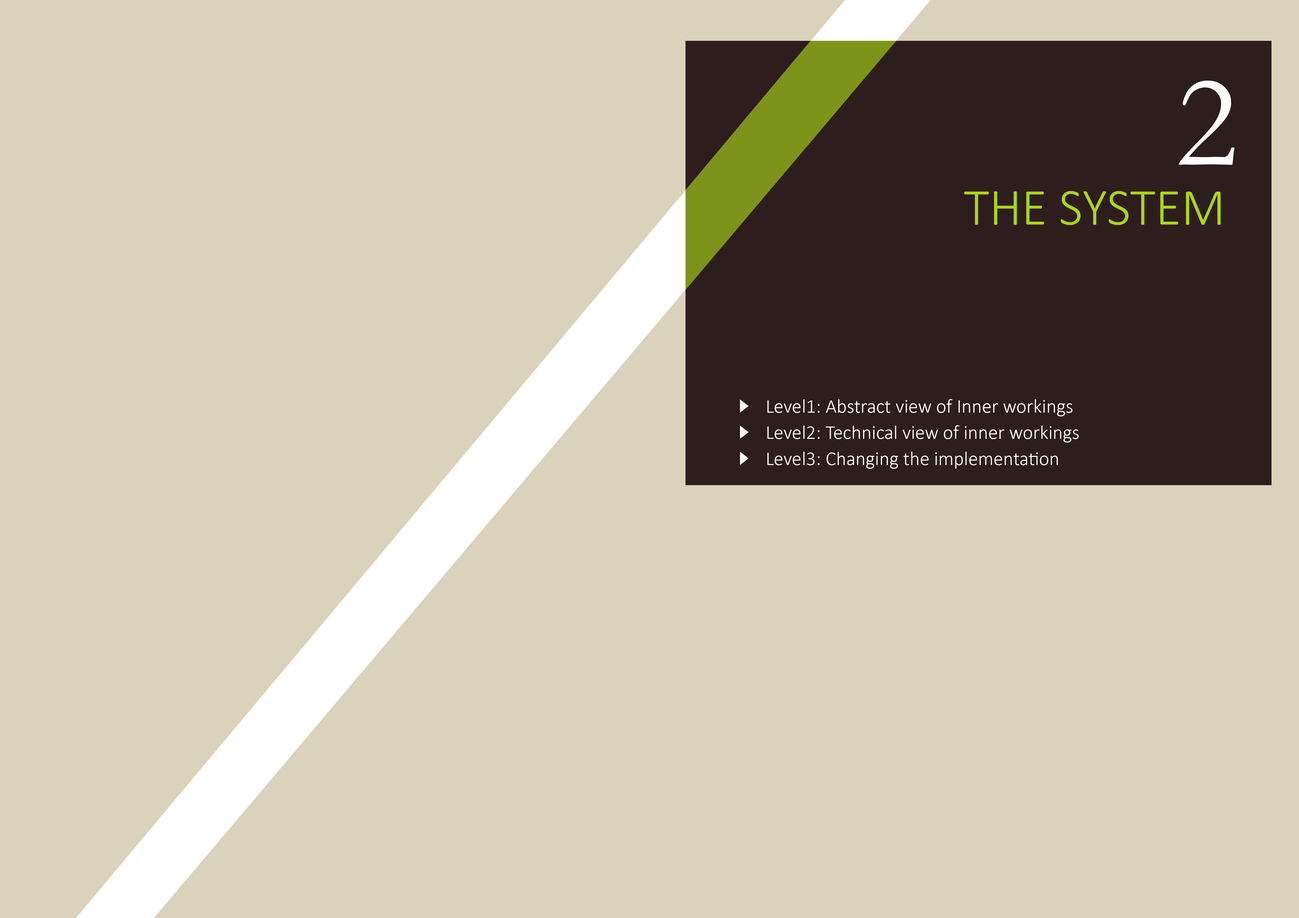
<style>
.page{position:relative;width:1299px;height:918px;background:#dad2bb}
.page>*{position:absolute;margin:0}
.t1{font:133.1px "Garamond";color:#ffffff}
.t2{font:52.4px "Calibri-Light";color:#abd616;text-transform:uppercase}
.t3{font:19.6px/26.2px "Calibri-Light";color:#ffffff}
</style>
<div class="page">
<p class="t1" style="left:1178px;top:81px;width:56px;height:84px">2</p>
<p class="t2" style="left:964px;top:191px;width:256px;height:34px">the system</p>
<p class="t3" style="left:767px;top:399px;width:311px;height:70px">Level1: Abstract view of Inner workings<br>Level2: Technical view of inner workings<br>Level3: Changing the implementation</p>
</div>
